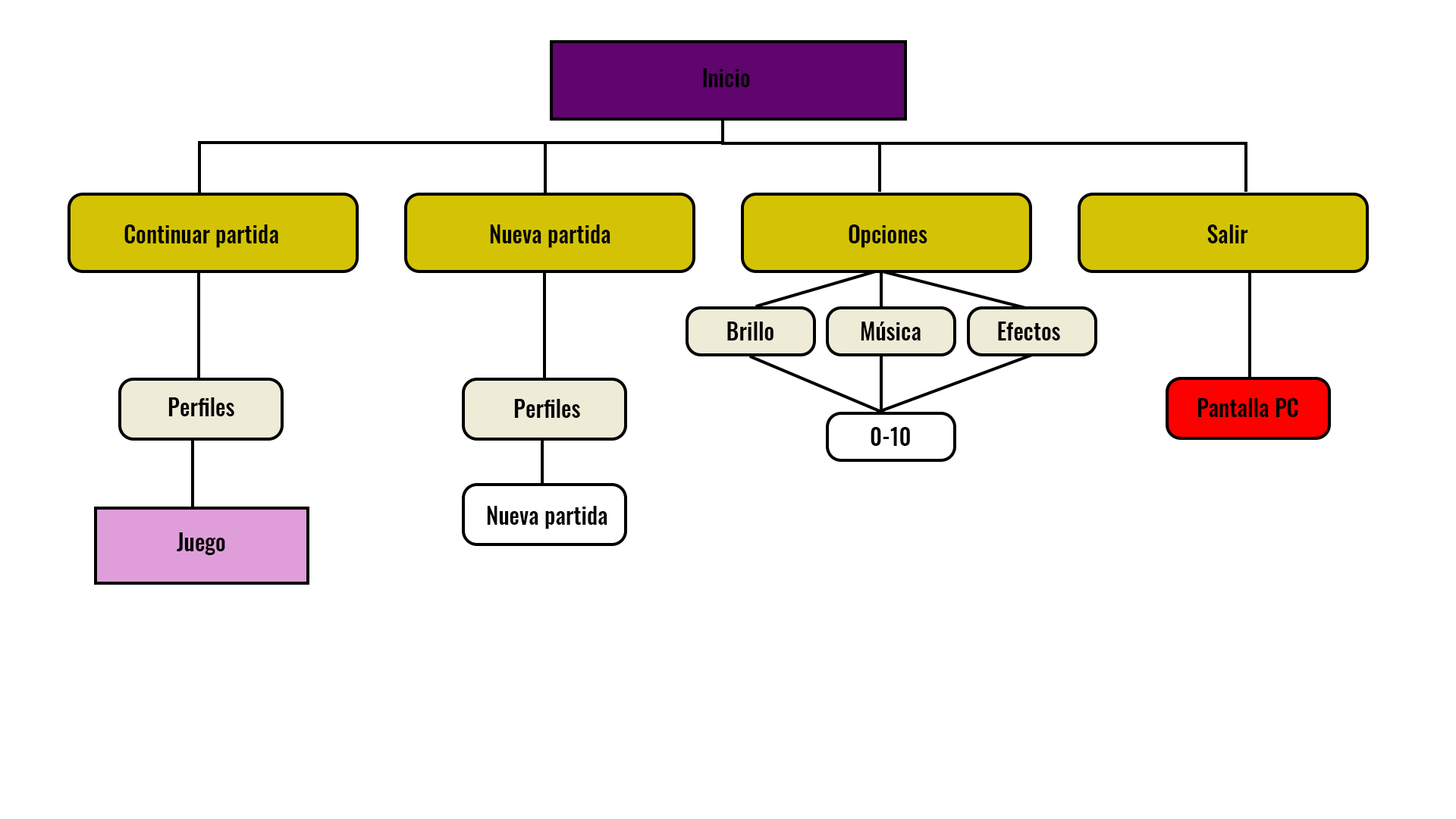
<style>
.page{position:relative;width:1456px;height:819px;background:#ffffff}
.page>*{position:absolute;margin:0}
.t1{font:22.7px "Oswald-Medium";color:#000000}
</style>
<div class="page">
<p class="t1" style="left:703px;top:68px;width:47px;height:19px">Inicio</p>
<p class="t1" style="left:124px;top:224px;width:154px;height:24px">Continuar partida</p>
<p class="t1" style="left:490px;top:224px;width:120px;height:24px">Nueva partida</p>
<p class="t1" style="left:849px;top:224px;width:78px;height:24px">Opciones</p>
<p class="t1" style="left:1207px;top:224px;width:41px;height:19px">Salir</p>
<p class="t1" style="left:727px;top:322px;width:46px;height:18px">Brillo</p>
<p class="t1" style="left:861px;top:322px;width:60px;height:18px">Música</p>
<p class="t1" style="left:998px;top:322px;width:62px;height:18px">Efectos</p>
<p class="t1" style="left:168px;top:397px;width:66px;height:19px">Perfiles</p>
<p class="t1" style="left:514px;top:399px;width:66px;height:19px">Perfiles</p>
<p class="t1" style="left:1197px;top:398px;width:101px;height:19px">Pantalla PC</p>
<p class="t1" style="left:871px;top:427px;width:39px;height:19px">0-10</p>
<p class="t1" style="left:487px;top:506px;width:120px;height:23px">Nueva partida</p>
<p class="t1" style="left:177px;top:532px;width:48px;height:23px">Juego</p>
</div>
